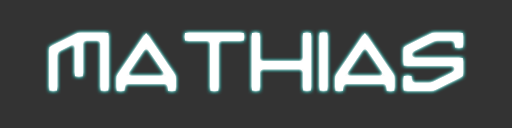
<style>
.page{position:relative;width:512px;height:128px;background:#333333}
.page>*{position:absolute;margin:0}
.t1{font:82px "KinineAlpha";color:#ffffff}
</style>
<div class="page">
<p class="t1" style="left:49px;top:32px;width:414px;height:59px">Mathias</p>
</div>
